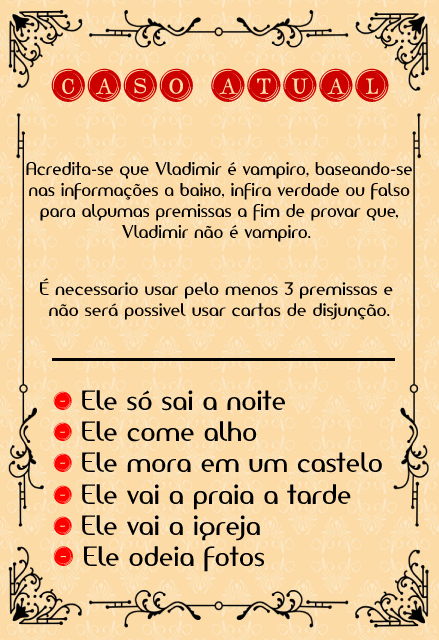
<style>
.page{position:relative;width:439px;height:640px;background:#fcdba6}
.page>*{position:absolute;margin:0}
.t1{font:44.5px "TypeKeysFilled";color:#cd0000}
.t2{font:17.4px "AmerikaSans";color:#000000;scale:0.95 1}
.t3{font:17px "AmerikaSans";color:#000000}
.t4{font:26.1px "AmerikaSans";color:#000000}
.t5{font:24.5px "TypeKeysFilled";color:#ff0000}
.t6{font:26.1px "TypeKeysFilled";color:#ff0000}
</style>
<div class="page">
<p class="t1" style="left:51px;top:68px;width:338px;height:34px">Caso atual</p>
<p class="t2" style="left:26px;top:161px;width:386px;height:81px;text-align:center">Acredita-se que Vladimir é vampiro, baseando-se<br>nas informações a baixo, infira verdade ou falso<br>para algumas premissas a fim de provar que,<br>Vladimir não é vampiro.</p>
<p class="t3" style="left:40px;top:278px;width:353px;height:42px;text-align:center">É necessario usar pelo menos 3 premissas e <br>não será possivel usar cartas de disjunção.</p>
<p class="t4" style="left:53px;top:390px;width:329px;height:182px"><span class="t5">- </span>Ele só sai a noite<br><span class="t5">- </span>Ele come alho<br><span class="t5">- </span>Ele mora em um castelo<br><span class="t5">- </span>Ele vai a praia a tarde<br><span class="t5">- </span>Ele vai a igreja<br><span class="t6">- </span>Ele odeia fotos</p>
</div>
